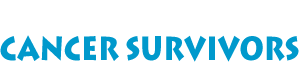
<style>
.page{position:relative;width:300px;height:62px;background:#ffffff}
.page>*{position:absolute;margin:0}
.t1{font:33px "LithosPro-Black";color:#0099cc;scale:0.82 1}
.t2{font:37px "LithosPro-Regular";color:#ffffff;scale:1.1 1}
</style>
<div class="page">
<p class="t1" style="left:0px;top:35px;width:299px;height:27px"><span class="t2"><br></span>CANCER SURVIVORS</p>
</div>
